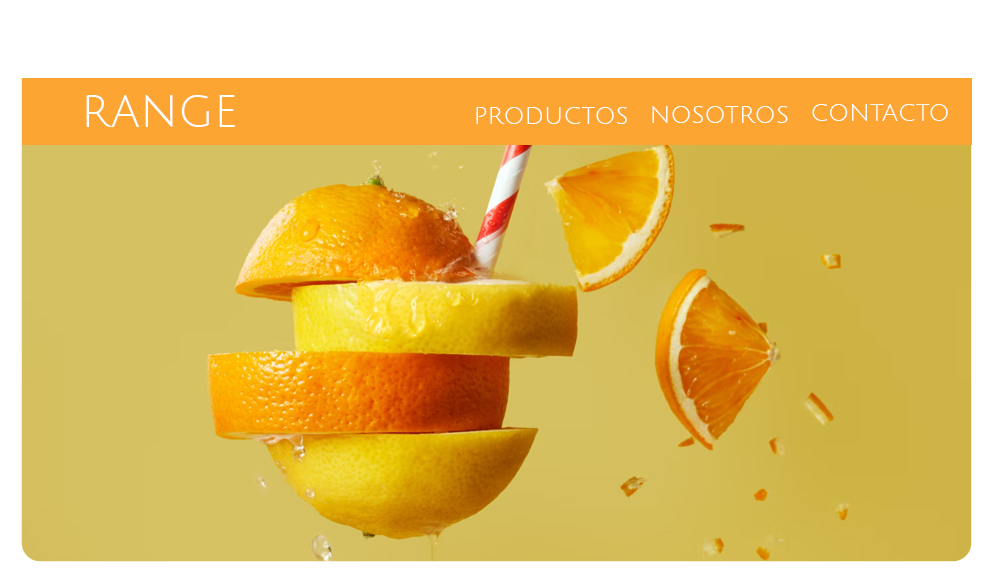
<style>
.page{position:relative;width:993px;height:583px;background:#ffffff}
.page>*{position:absolute;margin:0}
.t1{font:48px "JuliusSansOne-Regular";color:#ffffff}
.t2{font:24px "JuliusSansOne-Regular";color:#ffffff}
</style>
<div class="page">
<p class="t1" style="left:86px;top:95px;width:149px;height:32px">range</p>
<p class="t2" style="left:476px;top:107px;width:151px;height:17px">PRODUCTOS</p>
<p class="t2" style="left:652px;top:106px;width:136px;height:17px">NOSOTROS</p>
<p class="t2" style="left:812px;top:104px;width:136px;height:17px">CONTACTO</p>
</div>
